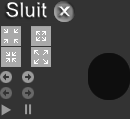
<style>
.page{position:relative;width:130px;height:119px;background:#333333}
.page>*{position:absolute;margin:0}
.t1{font:20px "ArialMT";font-weight:bold}
.t2{font:18px "ArialMT";color:#efefef;font-weight:bold;scale:1.28 1}
</style>
<div class="page">
<p class="t1" style="left:6px;top:2px;width:41px;height:16px">Sluit</p>
<p class="t2" style="left:58px;top:6px;width:12px;height:11px">x</p>
</div>
